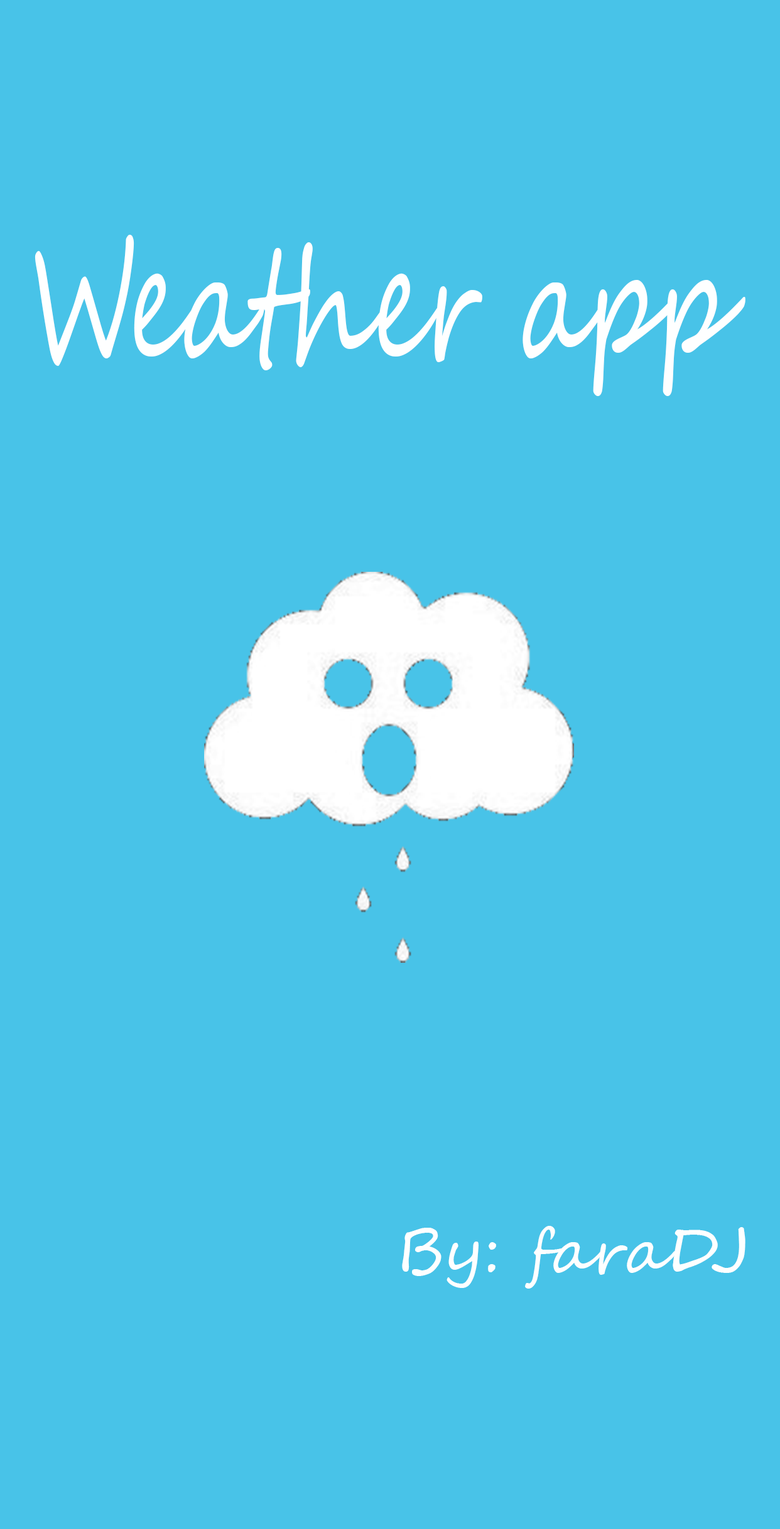
<style>
.page{position:relative;width:780px;height:1529px;background:#48c3e8}
.page>*{position:absolute;margin:0}
.t1{font:155.5px "SegoeScript";color:#feffff;scale:0.67 1}
.t2{font:62.8px "SegoeScript";color:#feffff}
</style>
<div class="page">
<p class="t1" style="left:35px;top:235px;width:710px;height:161px">Weather app</p>
<p class="t2" style="left:402px;top:1226px;width:343px;height:63px">By: faraDJ</p>
</div>
